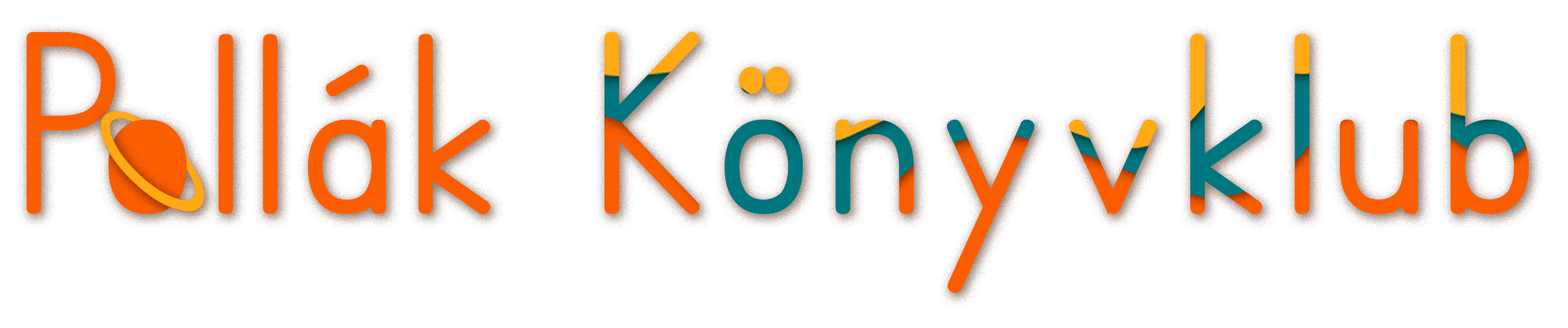
<style>
.page{position:relative;width:1568px;height:328px;background:#ffffff}
.page>*{position:absolute;margin:0}
.t1{font:235.2px "SimplePrint-Bold";letter-spacing:0.08em;color:#fa5e00}
</style>
<div class="page">
<p class="t1" style="left:26px;top:31px;width:1503px;height:263px">Pollák Könyvklub</p>
</div>
